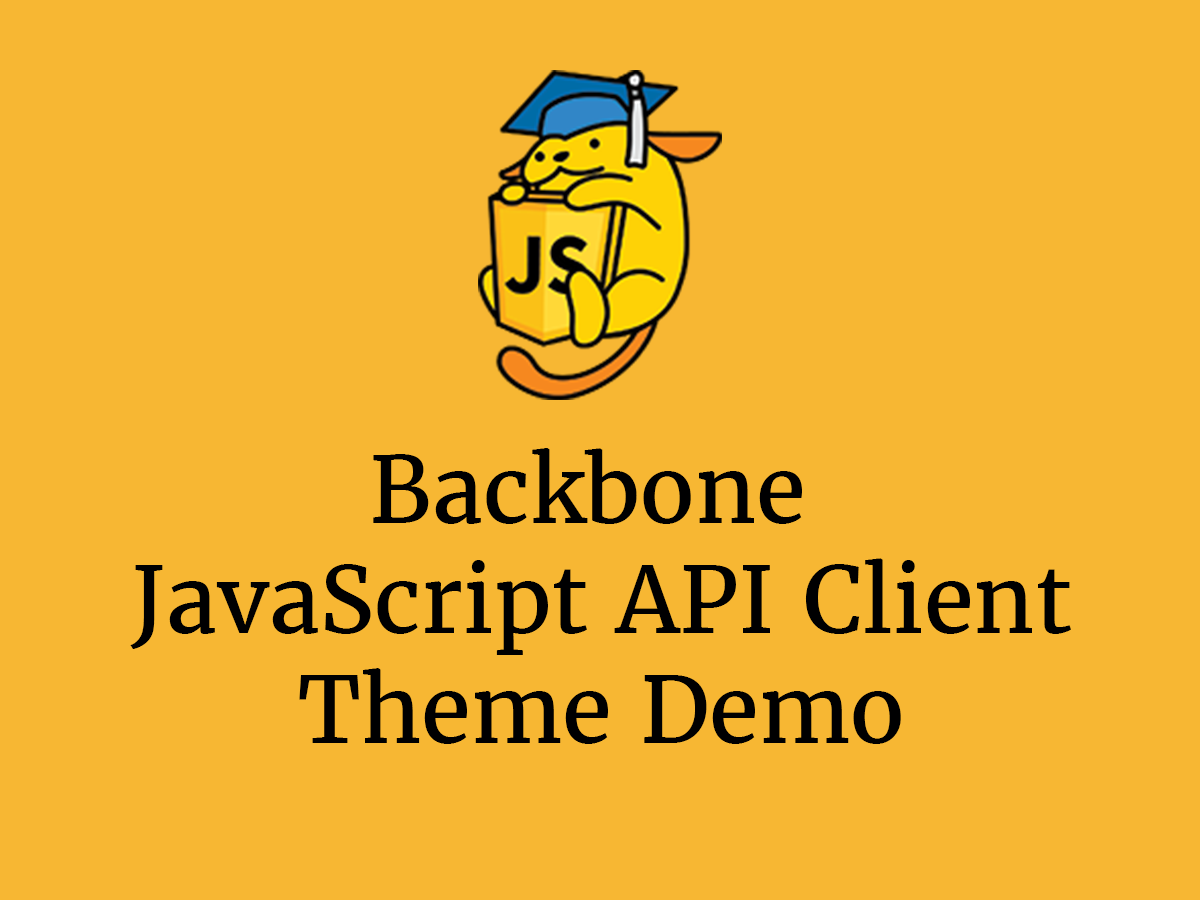
<style>
.page{position:relative;width:1200px;height:900px;background:#f7b733}
.page>*{position:absolute;margin:0}
.t1{font:91.3px "Merriweather-Regular";color:#000001}
</style>
<div class="page">
<p class="t1" style="left:130px;top:448px;width:941px;height:296px;text-align:center">Backbone <br>JavaScript API Client<br>Theme Demo</p>
</div>
